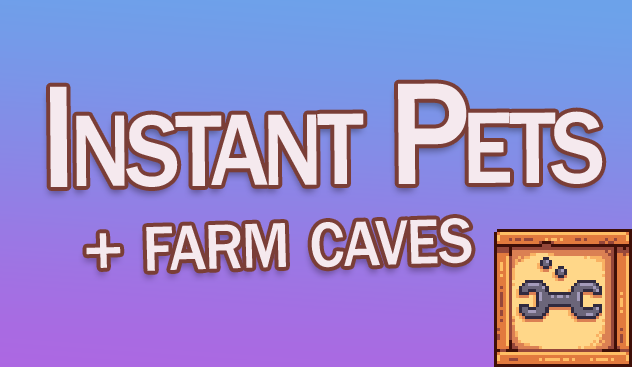
<style>
.page{position:relative;width:632px;height:367px}
.page>*{position:absolute;margin:0}
.t1{font:150px "FranklinGothic-Medium";letter-spacing:-0.04em;color:#f5e9ee;font-variant:small-caps;scale:0.9 1}
.t2{font:94px "FranklinGothic-Medium";letter-spacing:-0.01em;color:#f5e9ee;font-variant:small-caps;scale:0.92 1}
.t3{font:68px "FranklinGothic-Medium";color:#f5e9ee}
</style>
<div class="page">
<p class="t1" style="left:50px;top:83px;width:553px;height:104px">Instant Pets</p>
<p class="t2" style="left:146px;top:218px;width:326px;height:53px;rotate:-2deg">farm caves</p>
<p class="t3" style="left:86px;top:233px;width:35px;height:35px;rotate:-2deg">+</p>
</div>
